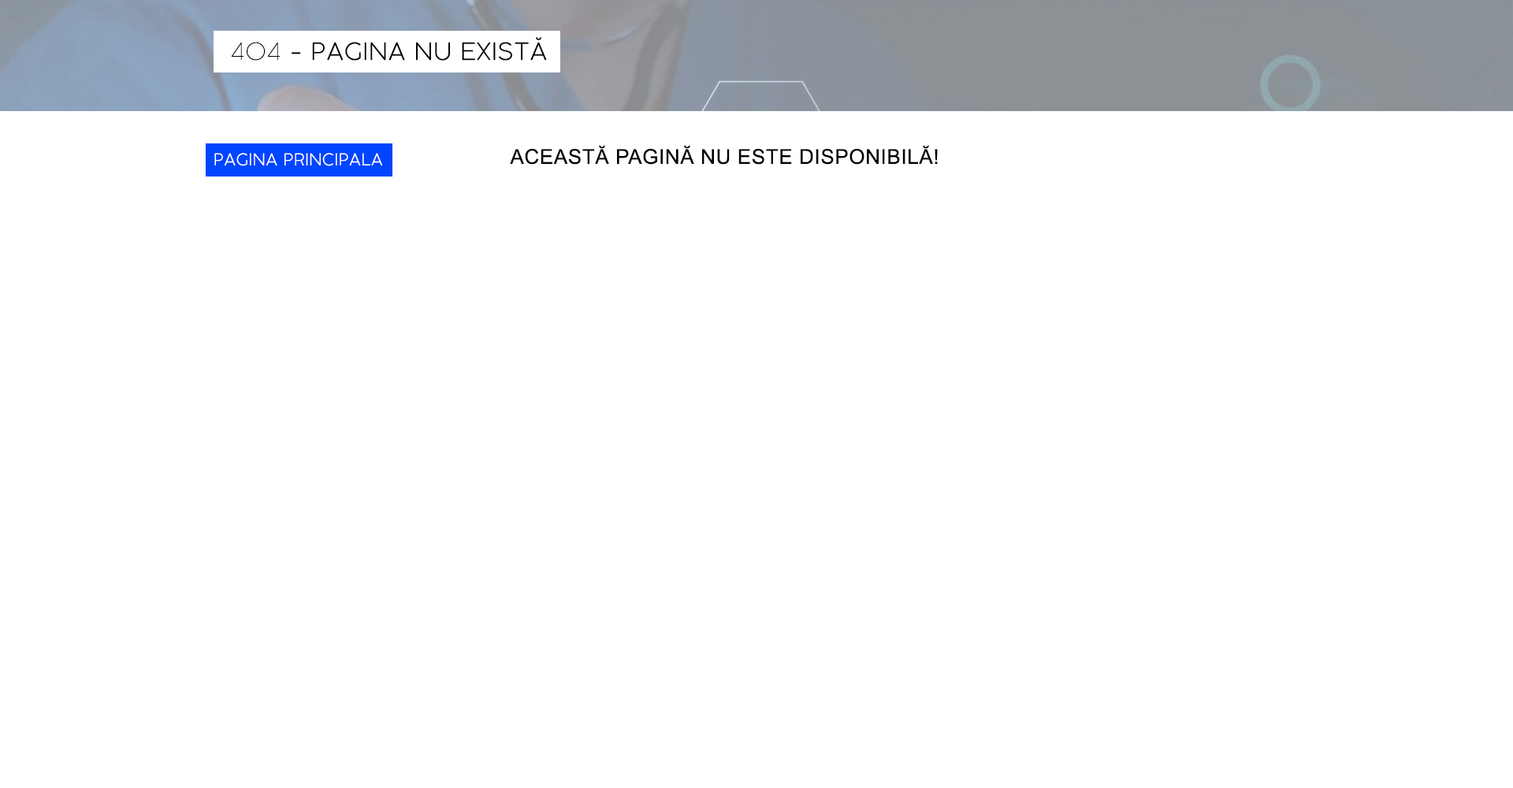
<style>
.page{position:relative;width:1513px;height:788px;background:#ffffff}
.page>*{position:absolute;margin:0}
.t1{font:23.7px "COCOGOOSE-UltraLight";letter-spacing:0.025em;color:#000000}
.t2{font:23.7px "CocogoosePro-Thin";letter-spacing:0.025em;color:#000000}
.t3{font:20.5px "ArialMT";letter-spacing:0.025em;color:#000000}
.t4{font:16.3px "COCOGOOSE-UltraLight";letter-spacing:0.025em;color:#ffffff}
</style>
<div class="page">
<p class="t1" style="left:231px;top:37px;width:316px;height:24px"><span class="t2">404</span> - PAGINA NU EXISTĂ</p>
<p class="t3" style="left:510px;top:145px;width:428px;height:20px">ACEASTĂ PAGINĂ NU ESTE DISPONIBILĂ!</p>
<p class="t4" style="left:214px;top:153px;width:168px;height:13px">PAGINA PRINCIPALA</p>
</div>
